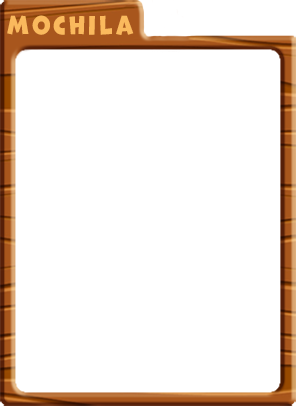
<style>
.page{position:relative;width:296px;height:406px;background:#ffffff}
.page>*{position:absolute;margin:0}
.t1{font:24px "Marvin";letter-spacing:0.13em;color:#fab95d}
</style>
<div class="page">
<p class="t1" style="left:7px;top:15px;width:127px;height:20px">mochila</p>
</div>
